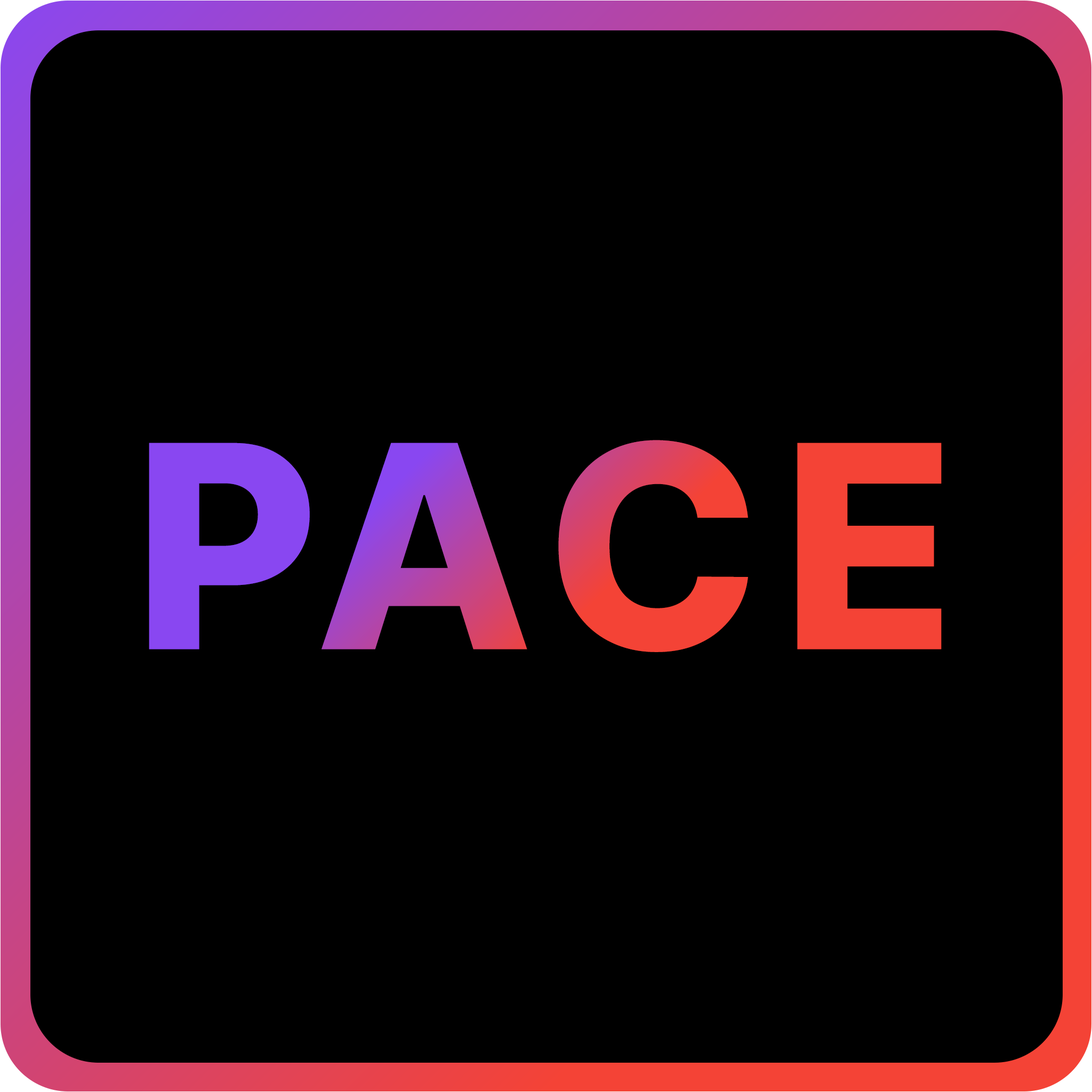
<style>
.page{position:relative;width:1092px;height:1092px;background:#000000}
.page>*{position:absolute;margin:0}
.t1{font:283.4px "Inter-ExtraBold";letter-spacing:0.075em}
</style>
<div class="page">
<p class="t1" style="left:149px;top:440px;width:793px;height:212px">PACE</p>
</div>
